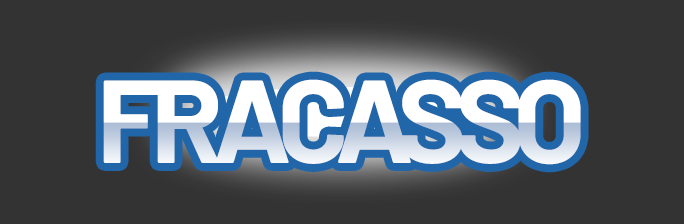
<style>
.page{position:relative;width:684px;height:224px;background:#333333}
.page>*{position:absolute;margin:0}
.t1{font:117.3px "Barlow-Bold";letter-spacing:-0.1em;color:#ffffff}
</style>
<div class="page">
<p class="t1" style="left:103px;top:79px;width:478px;height:86px">FRACASSO</p>
</div>
